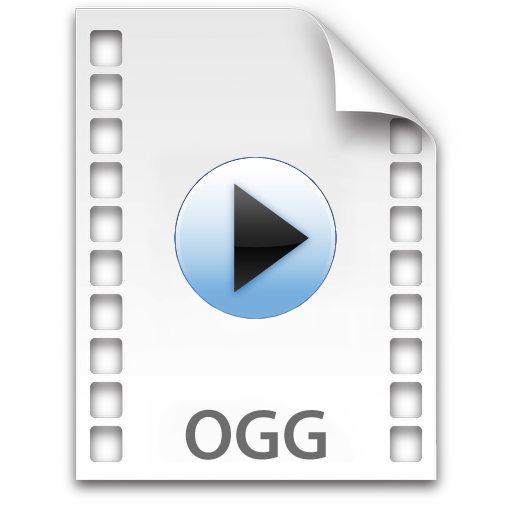
<style>
.page{position:relative;width:512px;height:512px;background:#ffffff}
.page>*{position:absolute;margin:0}
.t1{font:72px "MyriadPro-Semibold";color:#6e6d6d}
</style>
<div class="page">
<p class="t1" style="left:185px;top:409px;width:141px;height:51px">OGG</p>
</div>
